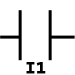
<style>
.page{position:relative;width:75px;height:75px;background:#ffffff}
.page>*{position:absolute;margin:0}
.t1{font:18px "Consolas-Bold";color:#000000;font-weight:bold}
</style>
<div class="page">
<p class="t1" style="left:26px;top:62px;width:20px;height:12px">I1</p>
</div>
